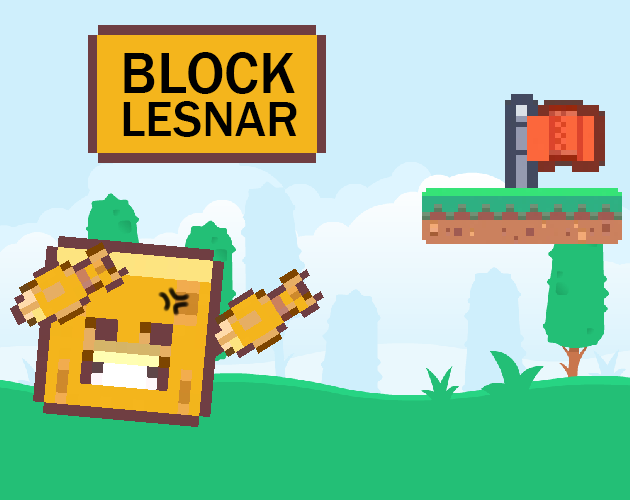
<style>
.page{position:relative;width:630px;height:500px;background:#cfeffc}
.page>*{position:absolute;margin:0}
.t1{font:60px "FranklinGothic-Medium";color:#000000}
.t2{font:51px "FranklinGothic-Medium";color:#000000}
</style>
<div class="page">
<p class="t1" style="left:124px;top:52px;width:171px;height:42px">BLOCK</p>
<p class="t2" style="left:123px;top:101px;width:174px;height:36px">LESNAR</p>
</div>
